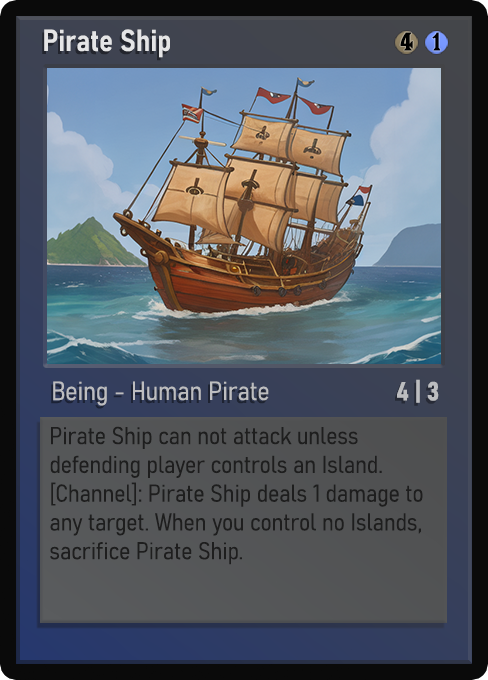
<style>
.page{position:relative;width:488px;height:680px}
.page>*{position:absolute;margin:0}
.t1{font:30px "Bahnschrift-SemiBoldSemiCondensed";color:#f2f2f2;font-weight:bold}
.t2{font:25px "WTRRoycroft";color:#000000;font-weight:bold;scale:1.09 1}
.t3{font:26px "Bahnschrift-LightSemiCondensed";color:#c8c8c8;font-weight:bold}
.t4{font:26px "Bahnschrift-BoldSemiCondensed";color:#bcbdc0;font-weight:bold}
.t5{font:24px "Bahnschrift-LightSemiCondensed";color:#1e1e1e;font-weight:bold}
</style>
<div class="page">
<p class="t1" style="left:44px;top:29px;width:126px;height:29px;opacity:0.9">Pirate Ship</p>
<p class="t2" style="left:400px;top:32px;width:13px;height:19px">4</p>
<p class="t2" style="left:432px;top:32px;width:9px;height:19px">1</p>
<p class="t3" style="left:53px;top:381px;width:216px;height:25px;opacity:0.9">Being - Human Pirate</p>
<p class="t4" style="left:397px;top:379px;width:42px;height:24px">4 | 3</p>
<p class="t5" style="left:50px;top:426px;width:373px;height:139px">Pirate Ship can not attack unless defending player controls an Island. [Channel]: Pirate Ship deals 1 damage to any target. When you control no Islands, sacrifice Pirate Ship.</p>
</div>
